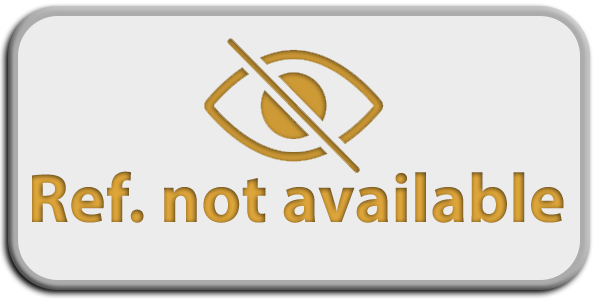
<style>
.page{position:relative;width:600px;height:300px;background:#ececec}
.page>*{position:absolute;margin:0}
.t1{font:69.4px "MyriadPro-Bold";letter-spacing:0.005em}
</style>
<div class="page">
<p class="t1" style="left:32px;top:171px;width:532px;height:52px">Ref. not available</p>
</div>
